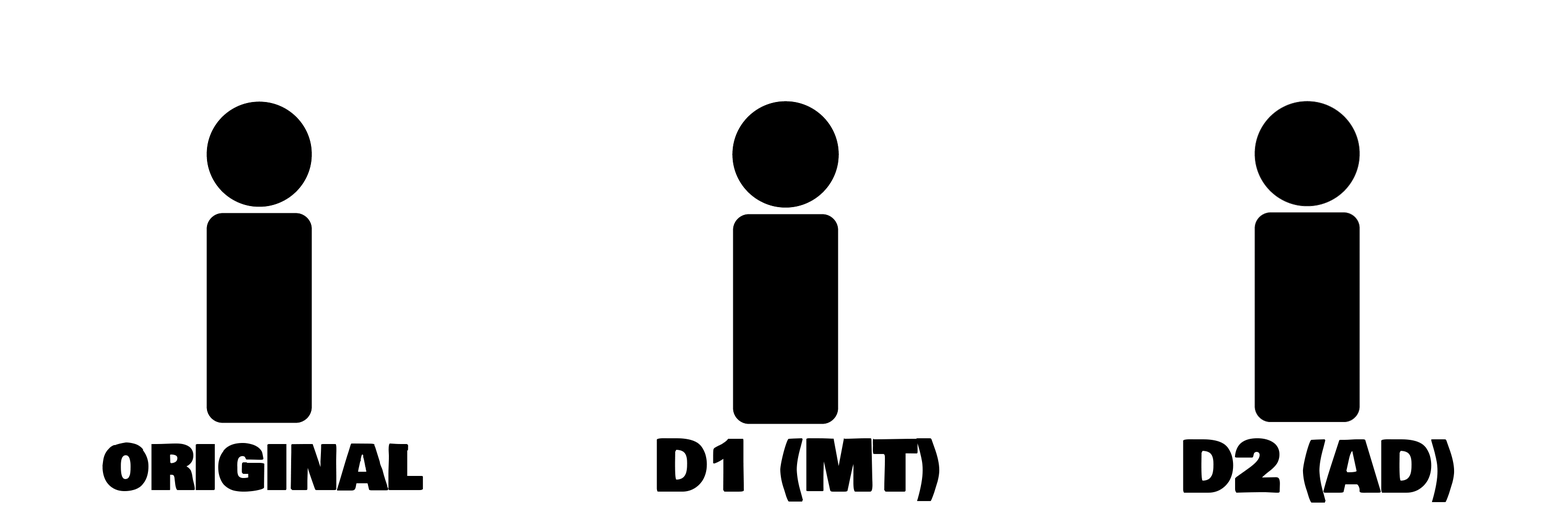
<style>
.page{position:relative;width:1568px;height:523px;background:#ffffff}
.page>*{position:absolute;margin:0}
.t1{font:70.7px "BowlbyOneSC-Regular";letter-spacing:-0.02em;color:#000000;scale:0.96 1}
</style>
<div class="page">
<p class="t1" style="left:656px;top:437px;width:284px;height:64px">D1 (MT)</p>
<p class="t1" style="left:1183px;top:438px;width:272px;height:64px">D2 (AD)</p>
<p class="t1" style="left:102px;top:442px;width:321px;height:49px">original</p>
</div>
